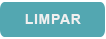
<style>
.page{position:relative;width:106px;height:39px;background:#53a7b1}
.page>*{position:absolute;margin:0}
.t1{font:14px "Arial-BoldMT";letter-spacing:0.05em;color:#f0f0f0}
</style>
<div class="page">
<p class="t1" style="left:25px;top:14px;width:56px;height:10px">LIMPAR</p>
</div>
